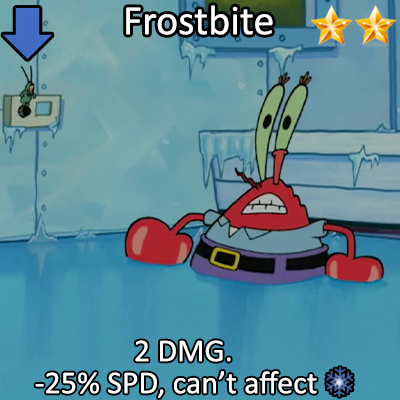
<style>
.page{position:relative;width:400px;height:400px}
.page>*{position:absolute;margin:0}
.t1{font:72px "Calibri";color:#ffffff}
.t2{font:55px/32px "Calibri";color:#ffffff}
</style>
<div class="page">
<p class="t1" style="left:126px;top:5px;width:147px;height:30px">Frostbite</p>
<p class="t2" style="left:35px;top:340px;width:282px;height:58px;text-align:center">2 DMG.<br>-25% SPD, can’t affect</p>
</div>
